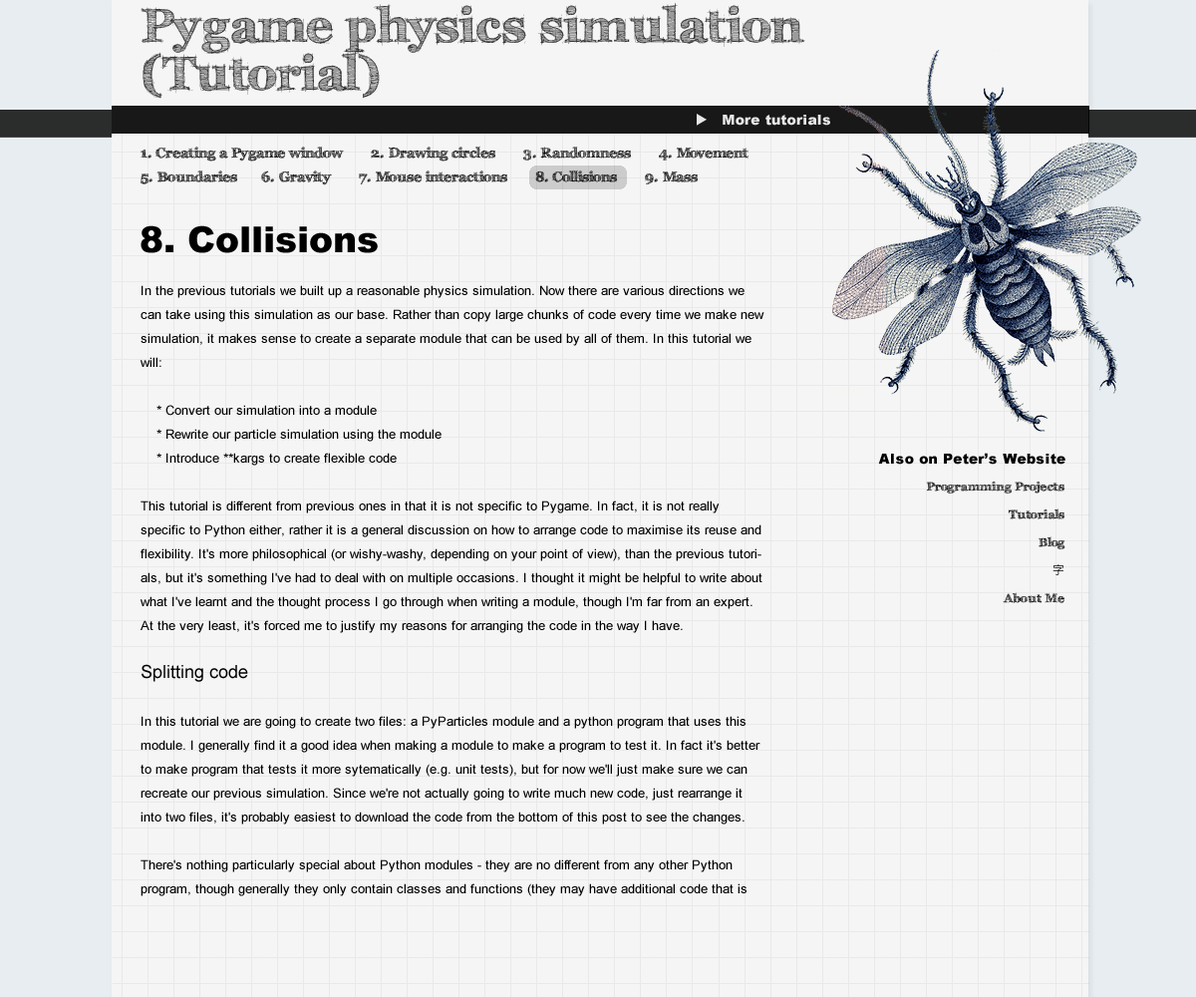
<style>
.page{position:relative;width:1196px;height:997px;background:#f5f5f5}
.page>*{position:absolute;margin:0}
.t1{font:47.8px/47.8px "FFFTusj-Bold";letter-spacing:0.02em;color:#353535}
.t2{font:14px "Arial-Black";letter-spacing:0.02em;color:#f5f5f5}
.t3{font:14px "Wingdings3";letter-spacing:0.02em;color:#f5f5f5}
.t4{font:14px/23.9px "FFFTusj-Bold";color:#000000}
.t5{font:35.9px "Arial-Black";color:#000000}
.t6{font:13px/23.9px "ArialMT";color:#000000}
.t7{font:17.9px/23.9px "ArialMT";color:#000000}
.t8{font:14px "Arial-Black";letter-spacing:0.02em;color:#010000}
.t9{font:12px/27.9px "FFFTusj-Bold";letter-spacing:0.02em;color:#000000}
.t10{font:12px/27.9px "HiraKakuProN-W3";letter-spacing:0.02em;color:#000000}
</style>
<div class="page">
<p class="t1" style="left:141px;top:2px;width:664px;height:97px">Pygame physics simulation <br>(Tutorial)</p>
<p class="t2" style="left:697px;top:114px;width:133px;height:12px;opacity:0.94"><span class="t3">u </span>More tutorials</p>
<p class="t4" style="left:141px;top:146px;width:608px;height:39px">1. Creating a Pygame window       2. Drawing circles       3. Randomness       4. Movement       5. Boundaries      6. Gravity       7. Mouse interactions       8. Collisions       9. Mass</p>
<p class="t5" style="left:141px;top:225px;width:237px;height:28px">8. Collisions</p>
<p class="t6" style="left:141px;top:285px;width:624px;height:611px">In the previous tutorials we built up a reasonable physics simulation. Now there are various directions we can take using this simulation as our base. Rather than copy large chunks of code every time we make new simulation, it makes sense to create a separate module that can be used by all of them. In this tutorial we will:<br><br>    * Convert our simulation into a module<br>    * Rewrite our particle simulation using the module<br>    * Introduce **kargs to create flexible code<br><br>This tutorial is different from previous ones in that it is not specific to Pygame. In fact, it is not really specific to Python either, rather it is a general discussion on how to arrange code to maximise its reuse and flexibility. It's more philosophical (or wishy-washy, depending on your point of view), than the previous tutorials, but it's something I've had to deal with on multiple occasions. I thought it might be helpful to write about what I've learnt and the thought process I go through when writing a module, though I'm far from an expert. At the very least, it's forced me to justify my reasons for arranging the code in the way I have.<br><br><span class="t7">Splitting code<br><br></span>In this tutorial we are going to create two files: a PyParticles module and a python program that uses this module. I generally find it a good idea when making a module to make a program to test it. In fact it's better to make program that tests it more sytematically (e.g. unit tests), but for now we'll just make sure we can recreate our previous simulation. Since we're not actually going to write much new code, just rearrange it into two files, it's probably easiest to download the code from the bottom of this post to see the changes.<br><br>There's nothing particularly special about Python modules - they are no different from any other Python program, though generally they only contain classes and functions (they may have additional code that is used when the file is run not as a module). When creating a module, we need to think about how we expect the code to be used. On one hand we want to include as much code as we can in our module to maximise reuse, but on the other hand we want to make the code as flexible as possible, which might mean leaving out some aspects to be defined outside of the module. We'll start by creating a file called PyParticle.py and adding the Particle object and the addVector(), findParticle() and collide() functions. We'll also need to import the math and random modules. But what about Pygame?</p>
<p class="t8" style="left:878px;top:453px;width:188px;height:12px">Also on Peter’s Website</p>
<p class="t9" style="left:926px;top:480px;width:140px;height:123px;text-align:right">Programming Projects        <br>Tutorials        <br>Blog        <br><span class="t10">字</span>        <br>About Me</p>
</div>
